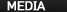
<style>
.page{position:relative;width:67px;height:12px}
.page>*{position:absolute;margin:0}
.t1{font:12.2px "HCRDotum-Bold";color:#ffffff}
</style>
<div class="page">
<p class="t1" style="left:7px;top:1px;width:39px;height:10px">MEDIA</p>
</div>
